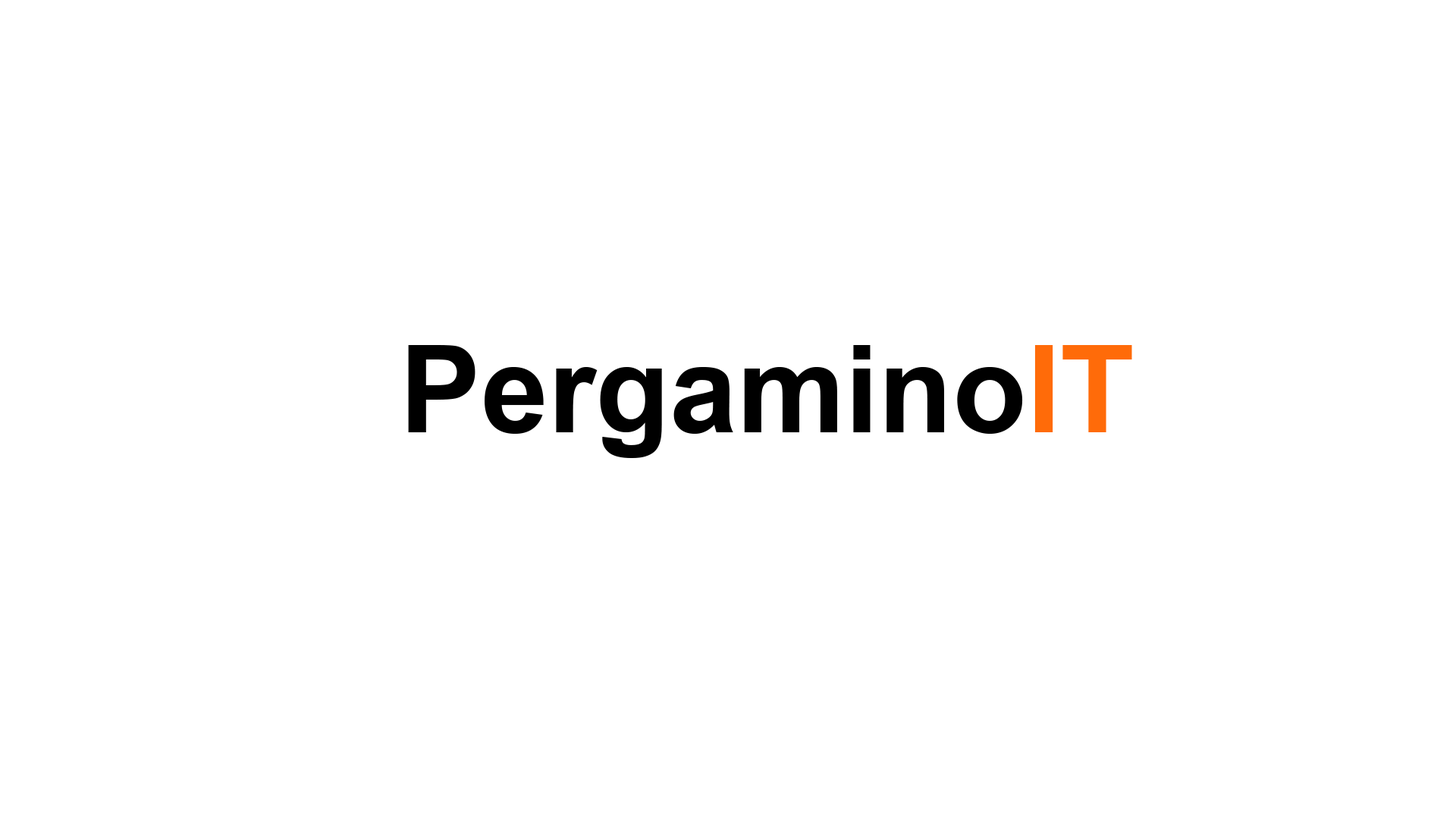
<style>
.page{position:relative;width:1456px;height:819px;background:#ffffff}
.page>*{position:absolute;margin:0}
.t1{font:121.3px "Arial-BoldMT";color:#000000}
.t2{font:121.3px "Arial-BoldMT";color:#ff6b09}
</style>
<div class="page">
<p class="t1" style="left:408px;top:345px;width:724px;height:113px">Pergamino<span class="t2">IT</span></p>
</div>
